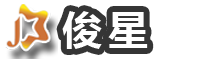
<style>
.page{position:relative;width:200px;height:60px;background:#ffffff}
.page>*{position:absolute;margin:0}
.t1{font:40px "MicrosoftYaHei-Bold";letter-spacing:0.15em;color:#ffffff}
</style>
<div class="page">
<p class="t1" style="left:62px;top:11px;width:86px;height:38px">俊星</p>
</div>
